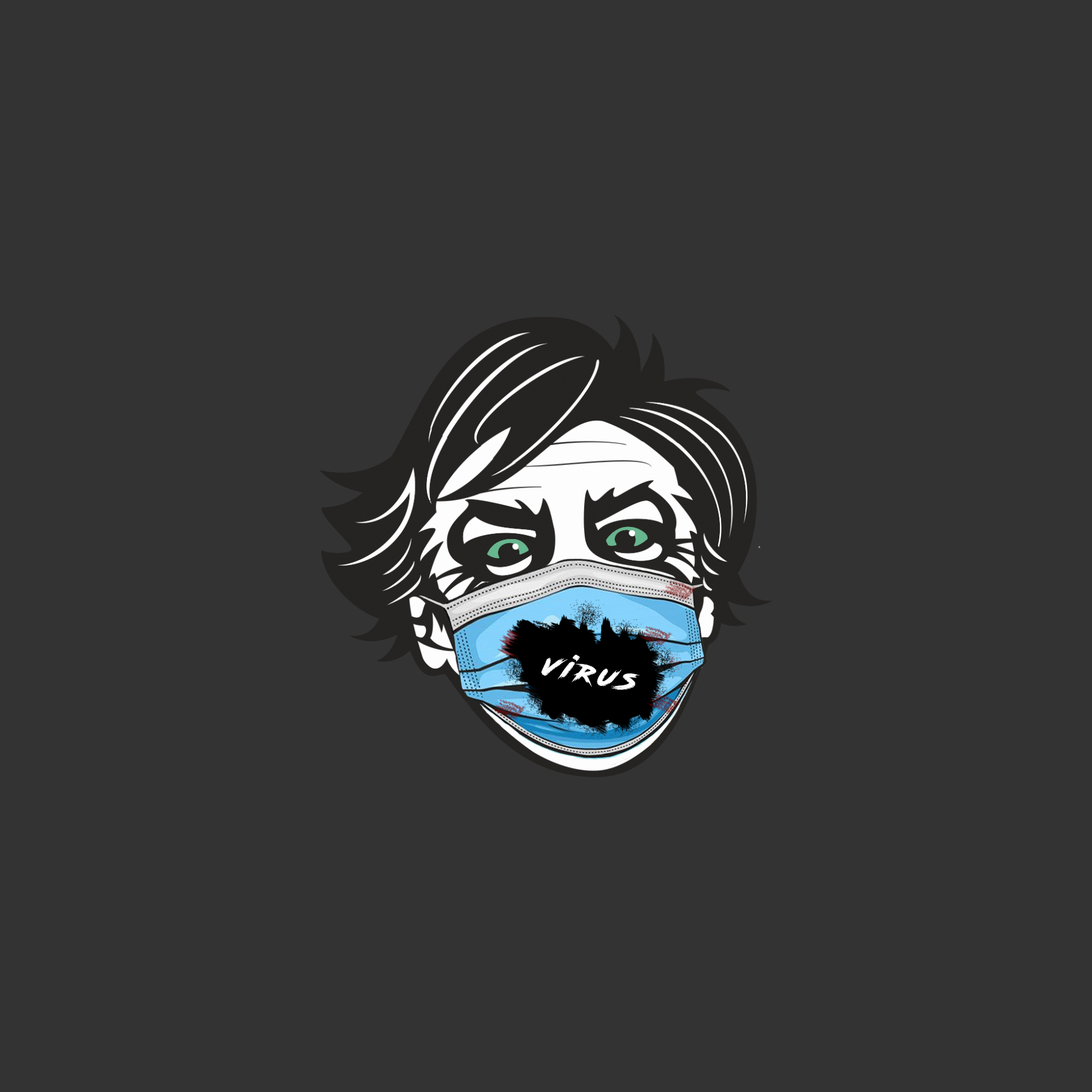
<style>
.page{position:relative;width:1092px;height:1092px;background:#333333}
.page>*{position:absolute;margin:0}
.t1{font:25.8px "RoadRage";letter-spacing:0.18em;color:#ffffff;scale:1.08 1}
</style>
<div class="page">
<p class="t1" style="left:541px;top:655px;width:99px;height:35px;rotate:11deg">virus</p>
</div>
